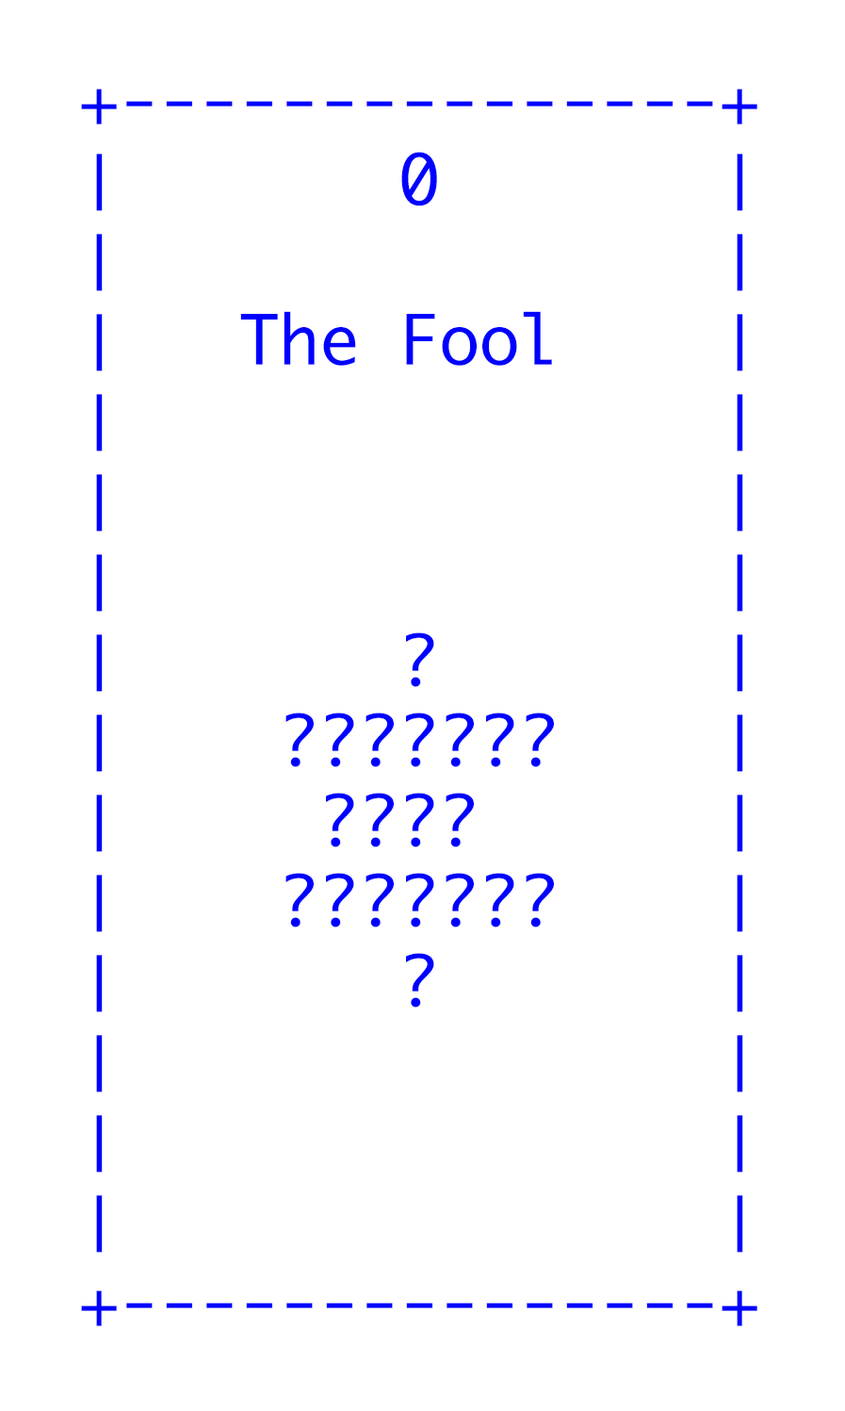
<style>
.page{position:relative;width:845px;height:1411px;background:#ffffff}
.page>*{position:absolute;margin:0}
.t1{font:66.7px "Monaco";color:#0000ff}
</style>
<div class="page">
<p class="t1" style="left:81px;top:89px;width:677px;height:1237px">+---------------+<br>│       0       │<br>│               │<br>│   The Fool    │<br>│               │<br>│               │<br>│               │<br>│       ?       │ <br>│    ???????    │ <br>│     ????      │ <br>│    ???????    │  <br>│       ?       │ <br>│               │<br>│               │<br>│               │<br>+---------------+</p>
</div>
